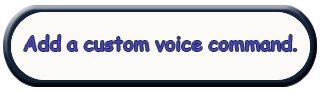
<style>
.page{position:relative;width:320px;height:92px;background:#fcfaf7}
.page>*{position:absolute;margin:0}
.t1{font:20px "ComicSansMS";color:#4a41c7}
</style>
<div class="page">
<p class="t1" style="left:24px;top:35px;width:273px;height:17px">Add a custom voice command.</p>
</div>
